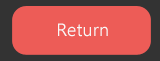
<style>
.page{position:relative;width:160px;height:61px;background:#ed5c57}
.page>*{position:absolute;margin:0}
.t1{font:18px "MyanmarText";color:#f8f8f8}
</style>
<div class="page">
<p class="t1" style="left:58px;top:23px;width:50px;height:14px">Return</p>
</div>
